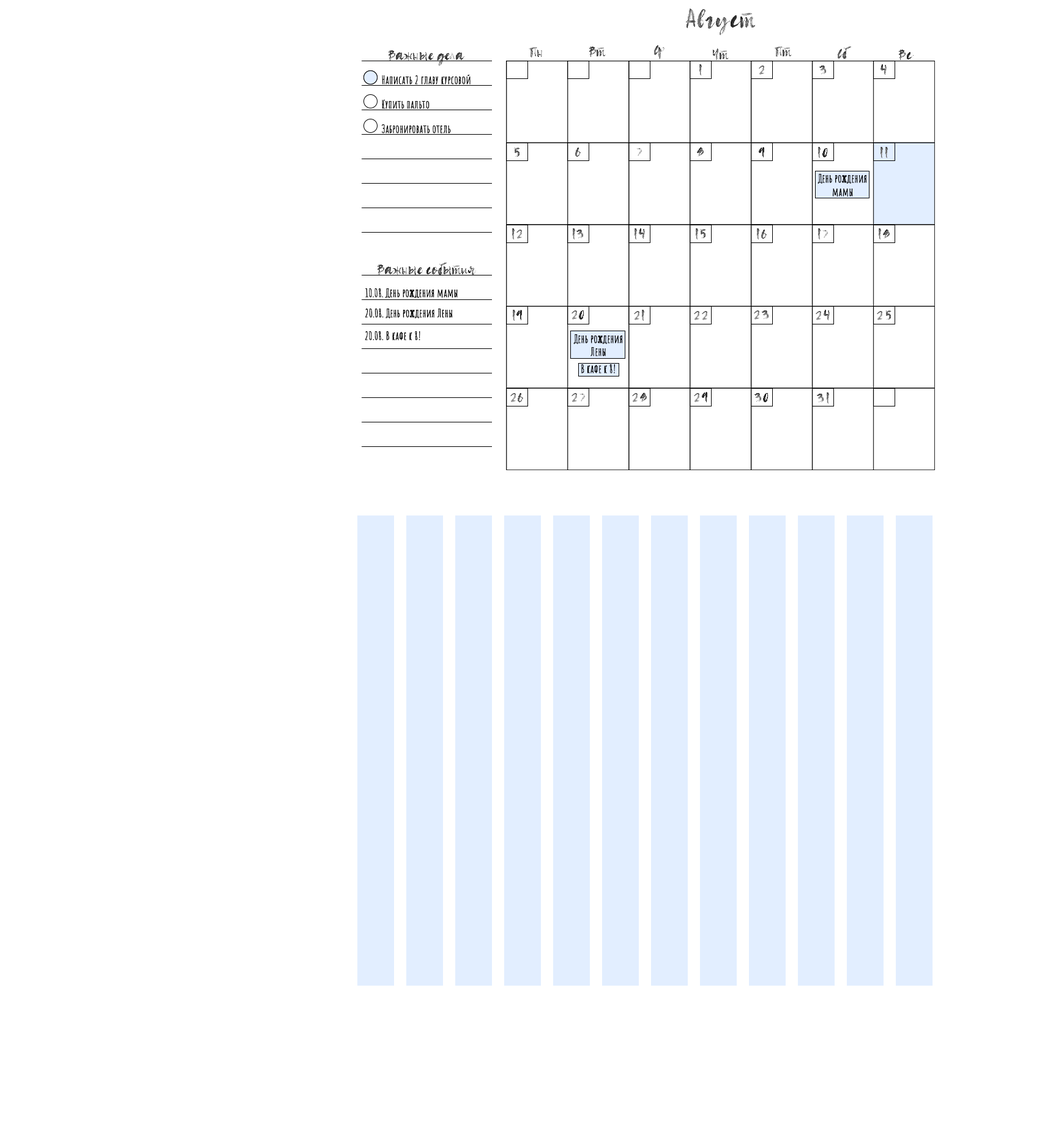
<style>
.page{position:relative;width:1061px;height:1124px;background:#ffffff}
.page>*{position:absolute;margin:0}
.t1{font:24.5px "Almost-SVG";font-weight:bold}
.t2{font:14.7px "Almost-SVG";font-weight:bold}
.t3{font:14.7px "Almost-SVG";color:#6a6a6a;font-weight:bold}
.t4{font:14.7px "Almost-SVG";color:#767676;font-weight:bold}
.t5{font:11px "AmaticSC-Regular";color:#070707;font-weight:bold}
.t6{font:14.7px "Almost-SVG";color:#2e2e2e;font-weight:bold}
.t7{font:11px "AmaticSC-Regular";color:#000000;font-weight:bold}
.t8{font:14.7px "Almost-SVG";color:#6e6e6e;font-weight:bold}
</style>
<div class="page">
<p class="t1" style="left:686px;top:9px;width:70px;height:26px">Август</p>
<p class="t2" style="left:389px;top:50px;width:76px;height:16px">Важные дела</p>
<p class="t3" style="left:529px;top:47px;width:13px;height:11px">Пн</p>
<p class="t2" style="left:589px;top:47px;width:17px;height:10px">Вт</p>
<p class="t2" style="left:654px;top:45px;width:11px;height:14px">Ср</p>
<p class="t2" style="left:713px;top:48px;width:16px;height:13px">Чт</p>
<p class="t2" style="left:774px;top:47px;width:18px;height:10px">Пт</p>
<p class="t2" style="left:837px;top:47px;width:14px;height:12px">Сб</p>
<p class="t2" style="left:899px;top:50px;width:15px;height:10px">Вс</p>
<p class="t3" style="left:700px;top:64px;width:2px;height:11px">1</p>
<p class="t4" style="left:759px;top:65px;width:6px;height:10px">2</p>
<p class="t2" style="left:819px;top:65px;width:7px;height:10px">3</p>
<p class="t2" style="left:881px;top:64px;width:6px;height:11px">4</p>
<p class="t5" style="left:382px;top:75px;width:89px;height:9px">Написать 2 главу курсовой</p>
<p class="t5" style="left:382px;top:100px;width:48px;height:9px">Купить пальто</p>
<p class="t5" style="left:381px;top:124px;width:70px;height:9px">Забронировать отель</p>
<p class="t2" style="left:513px;top:147px;width:7px;height:10px">5</p>
<p class="t2" style="left:575px;top:147px;width:6px;height:10px">6</p>
<p class="t2" style="left:636px;top:148px;width:6px;height:8px">7</p>
<p class="t2" style="left:697px;top:147px;width:7px;height:10px">8</p>
<p class="t6" style="left:759px;top:147px;width:6px;height:10px">9</p>
<p class="t2" style="left:818px;top:146px;width:10px;height:12px">10</p>
<p class="t3" style="left:881px;top:146px;width:7px;height:12px">11</p>
<p class="t7" style="left:818px;top:174px;width:49px;height:22px;text-align:center">День рождения<br>мамы</p>
<p class="t8" style="left:512px;top:228px;width:11px;height:11px">12</p>
<p class="t2" style="left:573px;top:228px;width:10px;height:11px">13</p>
<p class="t2" style="left:635px;top:228px;width:10px;height:11px">14</p>
<p class="t2" style="left:696px;top:228px;width:10px;height:11px">15</p>
<p class="t2" style="left:757px;top:228px;width:10px;height:11px">16</p>
<p class="t3" style="left:818px;top:228px;width:10px;height:11px">17</p>
<p class="t2" style="left:879px;top:228px;width:11px;height:11px">18</p>
<p class="t2" style="left:378px;top:263px;width:99px;height:12px">Важные события</p>
<p class="t7" style="left:365px;top:288px;width:93px;height:10px">10.08. День рождения мамы</p>
<p class="t7" style="left:365px;top:308px;width:88px;height:10px">20.08. День рождения Лены</p>
<p class="t2" style="left:513px;top:309px;width:10px;height:12px">19</p>
<p class="t2" style="left:572px;top:310px;width:12px;height:9px">20</p>
<p class="t8" style="left:634px;top:309px;width:10px;height:12px">21</p>
<p class="t4" style="left:694px;top:311px;width:14px;height:9px">22</p>
<p class="t2" style="left:754px;top:310px;width:15px;height:9px">23</p>
<p class="t2" style="left:816px;top:310px;width:14px;height:10px">24</p>
<p class="t2" style="left:877px;top:310px;width:15px;height:10px">25</p>
<p class="t7" style="left:365px;top:331px;width:55px;height:9px">20.08. В кафе к 8!</p>
<p class="t7" style="left:573px;top:334px;width:49px;height:22px;text-align:center">День рождения<br>Лены</p>
<p class="t7" style="left:581px;top:364px;width:34px;height:9px">В кафе к 8!</p>
<p class="t2" style="left:510px;top:393px;width:13px;height:9px">26</p>
<p class="t4" style="left:572px;top:393px;width:13px;height:9px">27</p>
<p class="t2" style="left:632px;top:392px;width:16px;height:10px">28</p>
<p class="t2" style="left:694px;top:392px;width:14px;height:10px">29</p>
<p class="t2" style="left:755px;top:393px;width:14px;height:9px">30</p>
<p class="t2" style="left:817px;top:392px;width:12px;height:11px">31</p>
</div>
